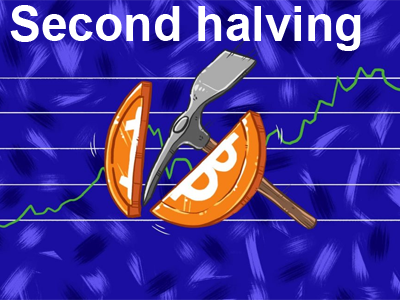
<style>
.page{position:relative;width:400px;height:300px}
.page>*{position:absolute;margin:0}
.t1{font:48px "Arial-BoldMT";color:#ffffff}
</style>
<div class="page">
<p class="t1" style="left:10px;top:5px;width:351px;height:46px">Second halving</p>
</div>
